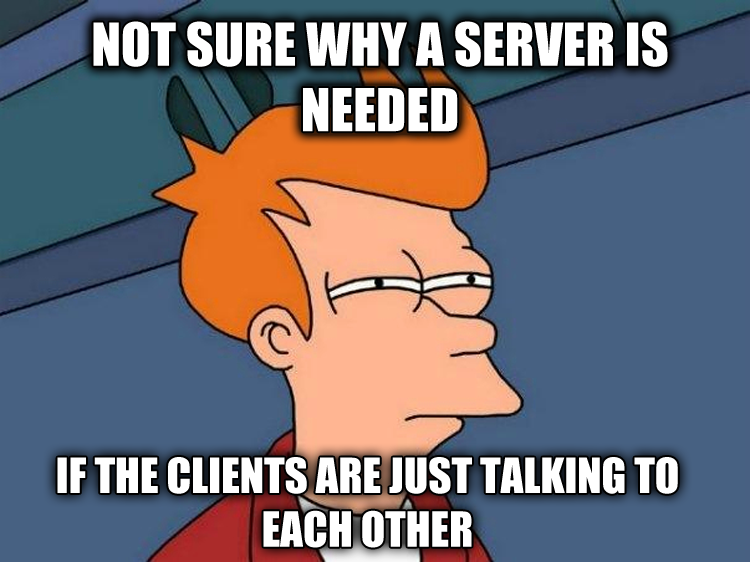
<style>
.page{position:relative;width:750px;height:562px;background:#476182}
.page>*{position:absolute;margin:0}
.t1{font:54.7px "Impact";color:#ffffff}
.t2{font:44.8px "Impact";color:#ffffff}
</style>
<div class="page">
<p class="t1" style="left:93px;top:21px;width:575px;height:111px;text-align:center">NOT SURE WHY A SERVER IS NEEDED</p>
<p class="t2" style="left:57px;top:457px;width:621px;height:91px;text-align:center">IF THE CLIENTS ARE JUST TALKING TO EACH OTHER</p>
</div>
